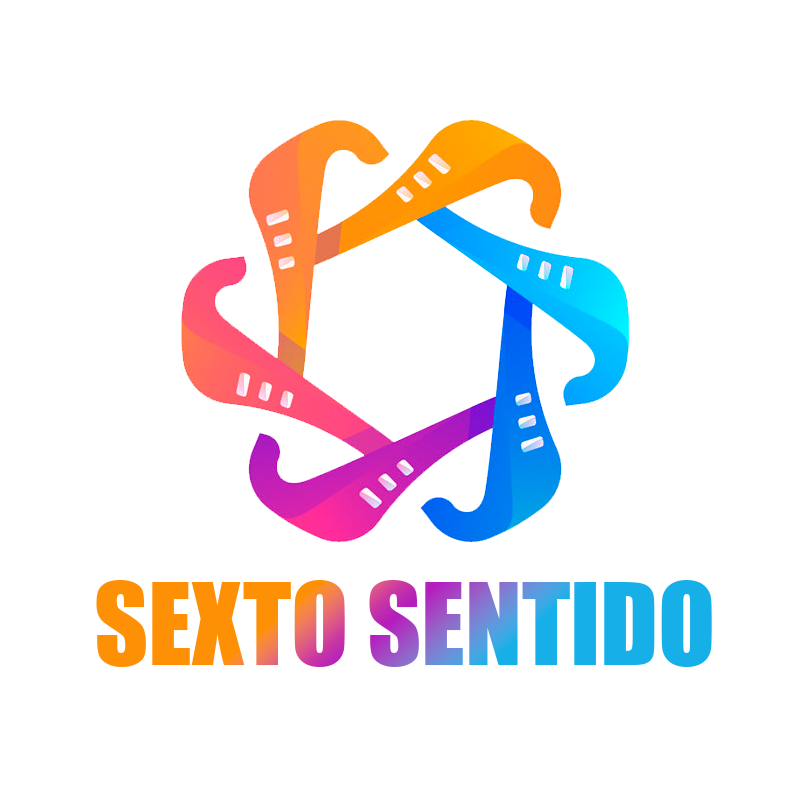
<style>
.page{position:relative;width:810px;height:810px;background:#ffffff}
.page>*{position:absolute;margin:0}
.t1{font:105px "Impact"}
</style>
<div class="page">
<p class="t1" style="left:96px;top:580px;width:616px;height:87px">SEXTO SENTIDO</p>
</div>
